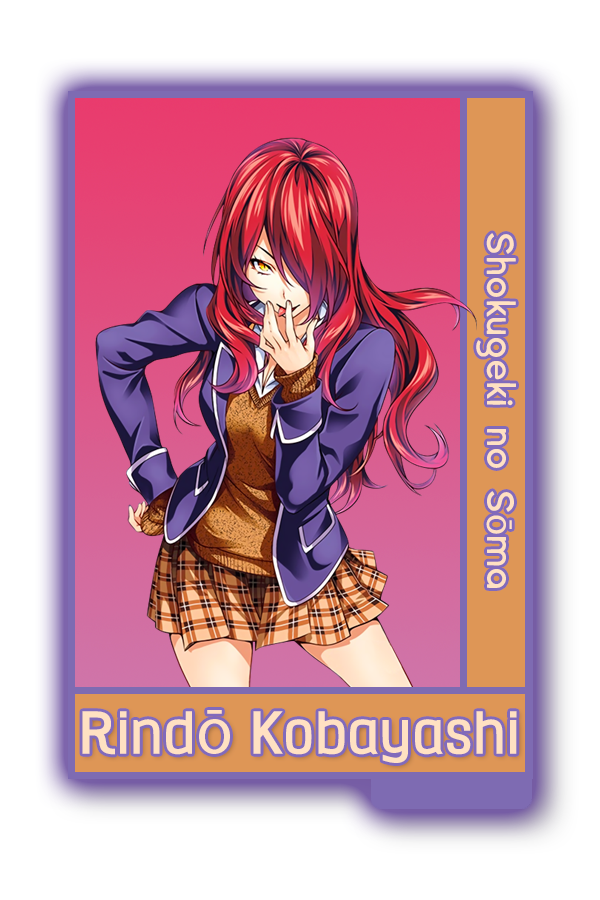
<style>
.page{position:relative;width:600px;height:900px;background:#ffffff}
.page>*{position:absolute;margin:0}
.t1{font:38.5px "cream-DEMO";color:#ffe2c8}
.t2{font:38.5px "MyriadPro-Regular";color:#ffe2c8}
.t3{font:67.5px "Hurufo&NumeroBold";color:#ffe2c8}
.t4{font:67.5px "MyriadPro-Regular";color:#ffe2c8}
</style>
<div class="page">
<p class="t1" style="left:476px;top:233px;width:40px;height:355px;rotate:90deg">Shokugeki no S<span class="t2">ō</span>ma</p>
<p class="t3" style="left:82px;top:710px;width:435px;height:53px">Rind<span class="t4">ō</span> Kobayashi</p>
</div>
